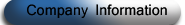
<style>
.page{position:relative;width:185px;height:25px}
.page>*{position:absolute;margin:0}
.t1{font:14px "Mangal";color:#000000}
</style>
<div class="page">
<p class="t1" style="left:27px;top:4px;width:140px;height:14px">Company Information</p>
</div>
